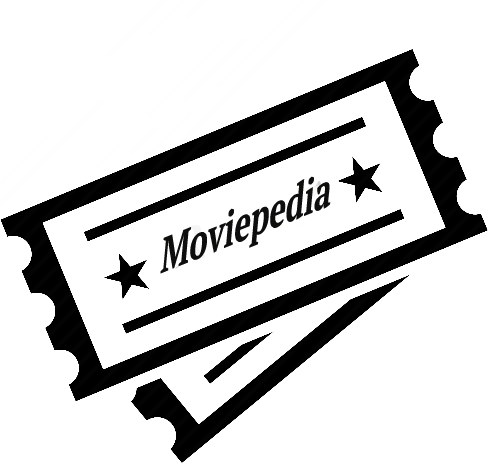
<style>
.page{position:relative;width:488px;height:463px;background:#ffffff}
.page>*{position:absolute;margin:0}
.t1{font:50.8px "PTSerif-Bold";color:#0e0e0d;scale:0.65 1}
</style>
<div class="page">
<p class="t1" style="left:160px;top:176px;width:171px;height:98px;rotate:-22deg">Moviepedia</p>
</div>
